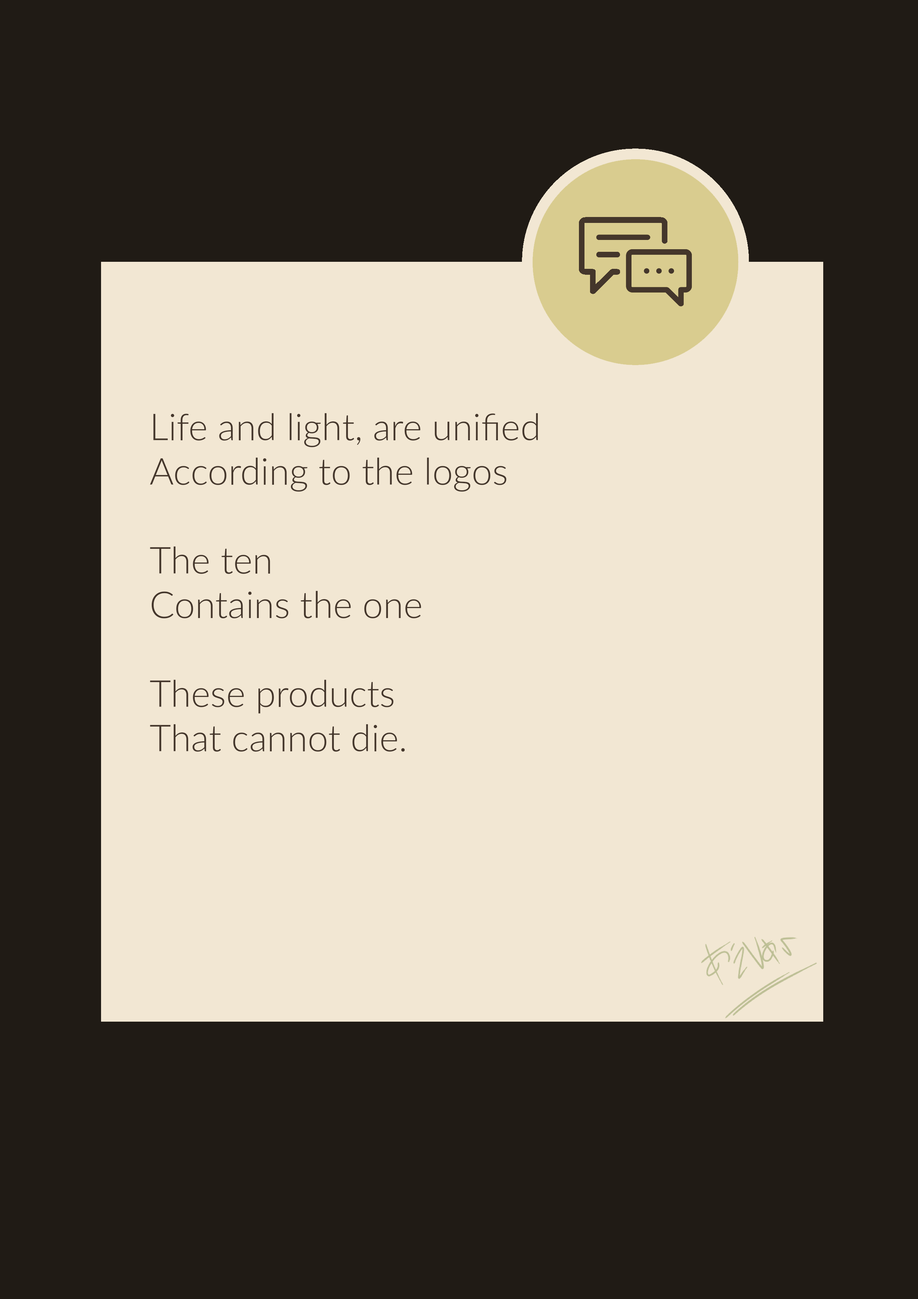
<style>
.page{position:relative;width:918px;height:1299px;background:#201b15}
.page>*{position:absolute;margin:0}
.t1{font:37px "Lato-Light";color:#44362b}
</style>
<div class="page">
<p class="t1" style="left:150px;top:413px;width:388px;height:339px">Life and light, are unified<br>According to the logos<br><br>The ten <br>Contains the one<br><br>These products<br>That cannot die.</p>
</div>
